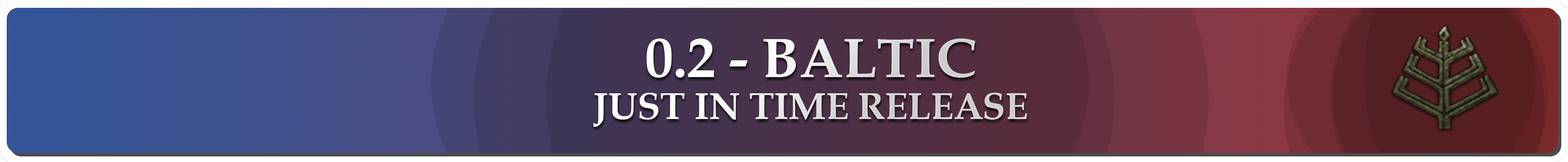
<style>
.page{position:relative;width:1568px;height:162px}
.page>*{position:absolute;margin:0}
.t1{font:37.3px/42px "BookAntiqua-Bold"}
.t2{font:56px "BookAntiqua-Bold"}
</style>
<div class="page">
<p class="t1" style="left:593px;top:39px;width:434px;height:88px;text-align:center"><span class="t2">0.2 - BALTIC<br></span>JUST IN TIME RELEASE</p>
</div>
